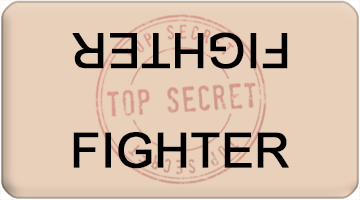
<style>
.page{position:relative;width:360px;height:200px;background:#e8d0bb}
.page>*{position:absolute;margin:0}
.t1{font:48px "ArialMT";color:#000000;font-weight:bold}
</style>
<div class="page">
<p class="t1" style="left:72px;top:32px;width:216px;height:37px;rotate:180deg">FIGHTER</p>
<p class="t1" style="left:73px;top:132px;width:216px;height:37px">FIGHTER</p>
</div>
